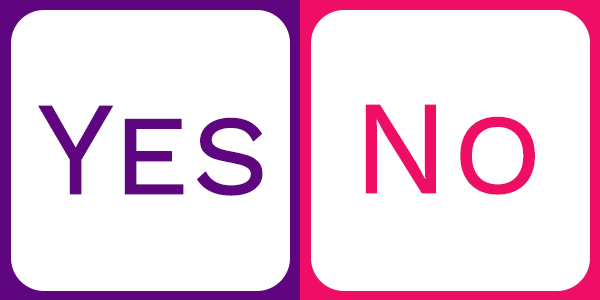
<style>
.page{position:relative;width:600px;height:300px;background:#ffffff}
.page>*{position:absolute;margin:0}
.t1{font:133.3px "WorkSans-Regular";letter-spacing:-0.005em;color:#600580;font-variant:small-caps;font-weight:bold}
.t2{font:133.3px "WorkSans-Regular";letter-spacing:-0.005em;color:#ef0e65;font-variant:small-caps;font-weight:bold}
</style>
<div class="page">
<p class="t1" style="left:38px;top:105px;width:225px;height:91px">Yes</p>
<p class="t2" style="left:365px;top:104px;width:170px;height:91px">No</p>
</div>
